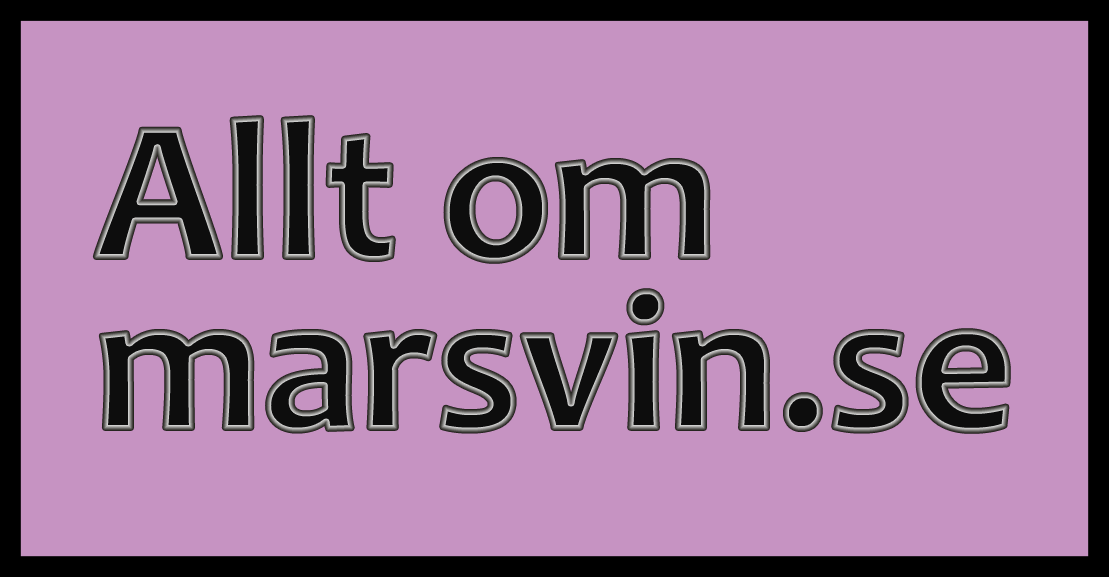
<style>
.page{position:relative;width:1109px;height:577px;background:#c693c2}
.page>*{position:absolute;margin:0}
.t1{font:200px/150px "Candara-Bold";color:#0d0d0d}
</style>
<div class="page">
<p class="t1" style="left:95px;top:118px;width:913px;height:313px">Allt om<br>marsvin.se</p>
</div>
